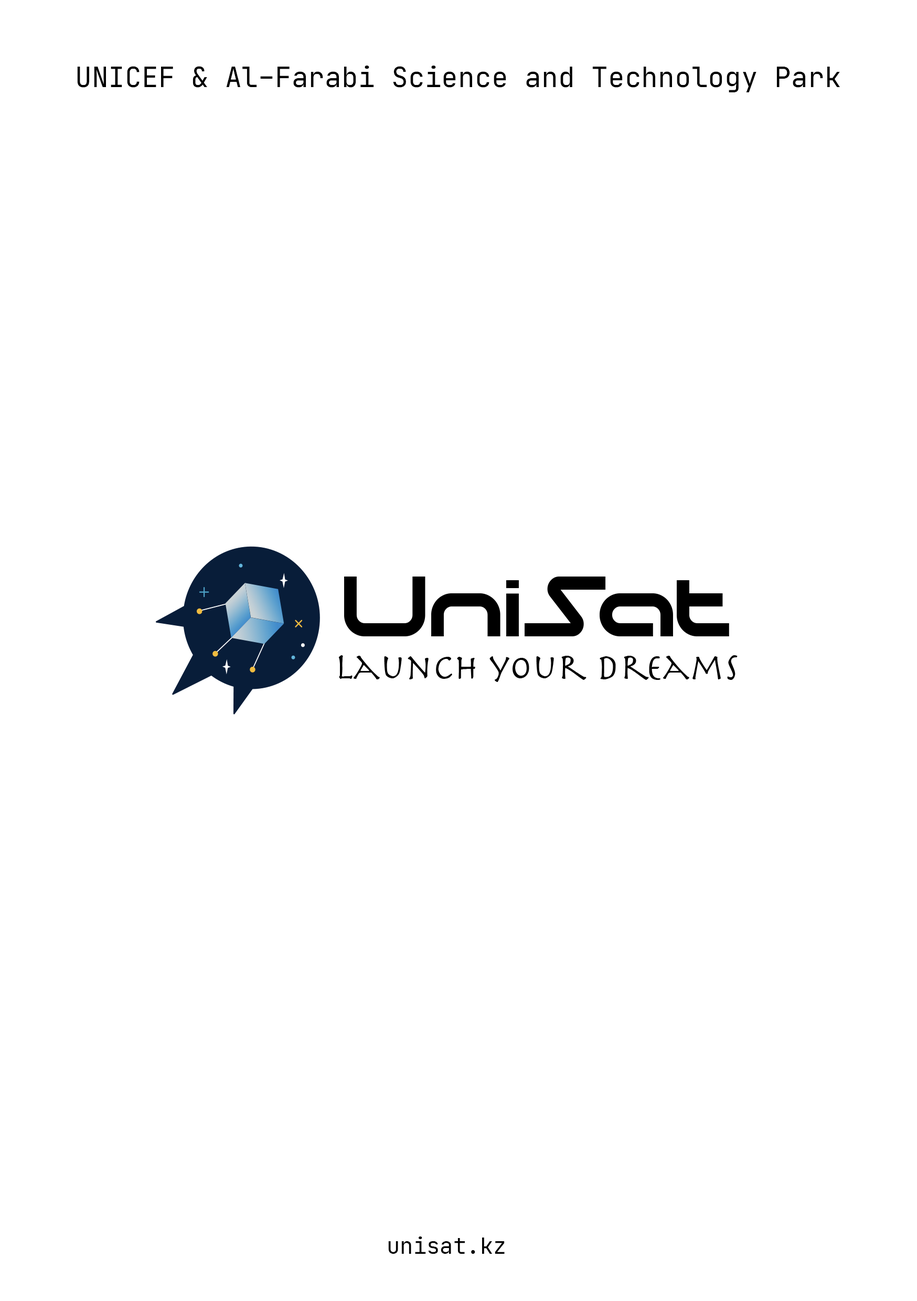
<style>
.page{position:relative;width:917px;height:1301px;background:#ffffff}
.page>*{position:absolute;margin:0}
.t1{font:27.8px "JetBrainsMono-Regular";color:#000000}
.t2{font:22.2px "JetBrainsMono-Regular";color:#000000}
</style>
<div class="page">
<p class="t1" style="left:77px;top:66px;width:763px;height:26px">UNICEF &amp; Al-Farabi Science and Technology Park</p>
<p class="t2" style="left:388px;top:1236px;width:117px;height:17px">unisat.kz</p>
</div>
